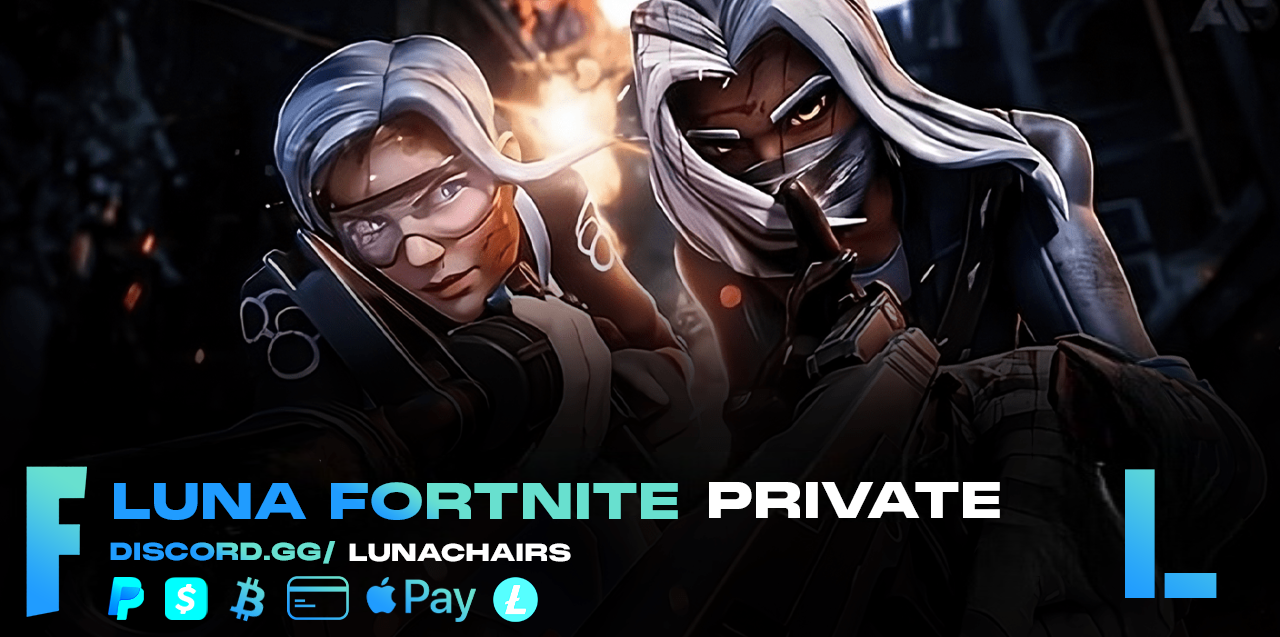
<style>
.page{position:relative;width:1280px;height:637px}
.page>*{position:absolute;margin:0}
.t1{font:183.3px "Town40Stencil-Bold";color:#34b1f3}
.t2{font:50px "PPMonumentExtended-Black"}
.t3{font:50px "PPMonumentExtended-Black";color:#ffffff}
.t4{font:24px "PPMonumentExtended-Black"}
.t5{font:24px "PPMonumentExtended-Black";color:#ffffff}
</style>
<div class="page">
<p class="t1" style="left:1125px;top:469px;width:92px;height:129px">L</p>
<p class="t2" style="left:114px;top:482px;width:564px;height:38px">LUNA FORTNITE</p>
<p class="t3" style="left:709px;top:482px;width:291px;height:36px">PRIVATE</p>
<p class="t4" style="left:110px;top:541px;width:226px;height:23px">DISCORD.GG/</p>
<p class="t5" style="left:349px;top:543px;width:222px;height:19px">LUNACHAIRS</p>
</div>
